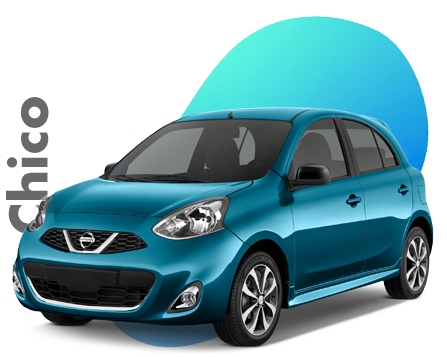
<style>
.page{position:relative;width:447px;height:357px;background:#ffffff}
.page>*{position:absolute;margin:0}
.t1{font:50px "Futura-Bold";color:#696969}
</style>
<div class="page">
<p class="t1" style="left:6px;top:97px;width:43px;height:137px;rotate:-90deg">Chico</p>
</div>
